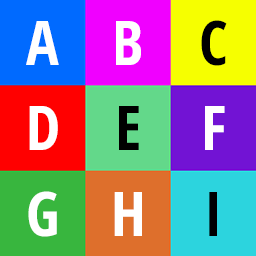
<style>
.page{position:relative;width:256px;height:256px}
.page>*{position:absolute;margin:0}
.t1{font:61.4px "OpenSansCondensed-Bold";color:#ffffff}
.t2{font:61.4px "OpenSansCondensed-Bold";color:#000000}
</style>
<div class="page">
<p class="t1" style="left:26px;top:21px;width:33px;height:44px">A</p>
<p class="t1" style="left:116px;top:21px;width:25px;height:44px">B</p>
<p class="t2" style="left:201px;top:20px;width:26px;height:46px">C</p>
<p class="t1" style="left:29px;top:106px;width:29px;height:44px">D</p>
<p class="t2" style="left:119px;top:106px;width:20px;height:44px">E</p>
<p class="t1" style="left:205px;top:106px;width:20px;height:44px">F</p>
<p class="t1" style="left:28px;top:191px;width:29px;height:46px">G</p>
<p class="t1" style="left:114px;top:192px;width:28px;height:44px">H</p>
<p class="t2" style="left:209px;top:192px;width:8px;height:44px">I</p>
</div>
